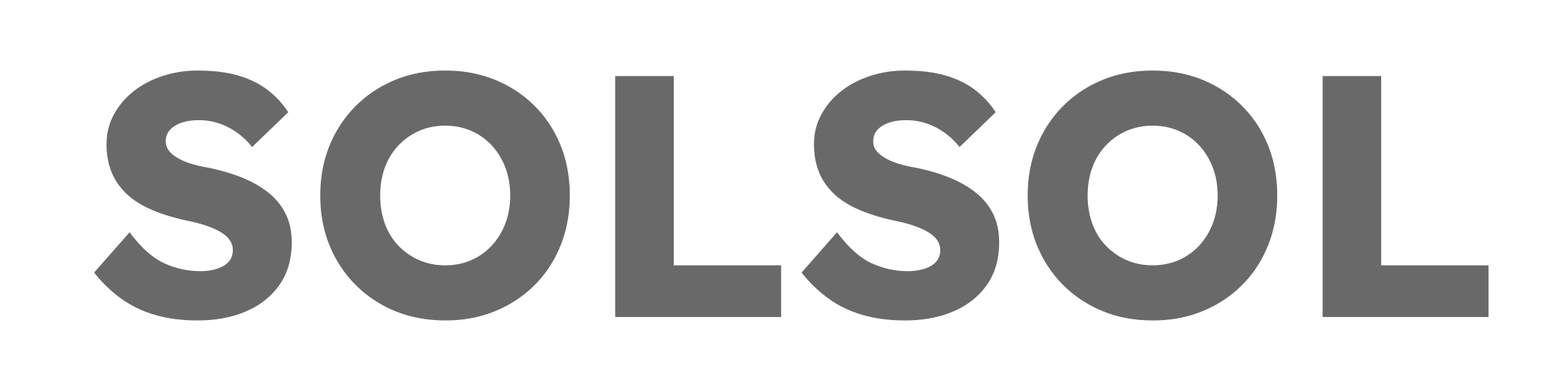
<style>
.page{position:relative;width:1568px;height:392px;background:#ffffff}
.page>*{position:absolute;margin:0}
.t1{font:344.1px "Lexend-Bold";color:#696969}
</style>
<div class="page">
<p class="t1" style="left:93px;top:70px;width:1396px;height:251px">SOLSOL</p>
</div>
